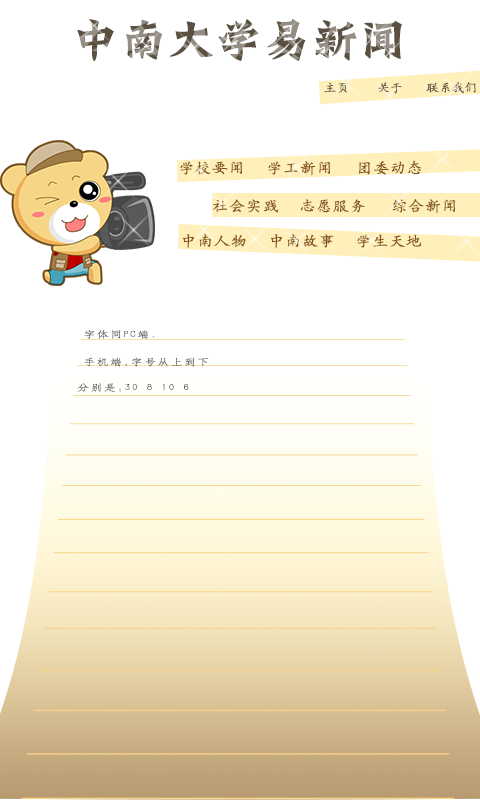
<style>
.page{position:relative;width:480px;height:800px;background:#ffffff}
.page>*{position:absolute;margin:0}
.t1{font:45px "HYh3gj";scale:1.07 1}
.t2{font:12px "HYc1gj";color:#5b5040;scale:1.07 1}
.t3{font:15px "HYc1gj";letter-spacing:0.05em;color:#855615;scale:1.07 1}
.t4{font:9px "HYd1gj";letter-spacing:0.111em;color:#676767;scale:1.33 1}
.t5{font:9px "HYd1gj";letter-spacing:0.111em;color:#595959;scale:1.33 1}
</style>
<div class="page">
<p class="t1" style="left:77px;top:19px;width:325px;height:43px">中南大学易新闻</p>
<p class="t2" style="left:324px;top:82px;width:24px;height:11px">主页</p>
<p class="t2" style="left:378px;top:82px;width:24px;height:12px">关于</p>
<p class="t2" style="left:426px;top:82px;width:50px;height:12px">联系我们</p>
<p class="t3" style="left:180px;top:161px;width:63px;height:14px">学校要闻</p>
<p class="t3" style="left:268px;top:161px;width:63px;height:15px">学工新闻</p>
<p class="t3" style="left:359px;top:160px;width:63px;height:15px">团委动态</p>
<p class="t3" style="left:213px;top:199px;width:66px;height:14px">社会实践</p>
<p class="t3" style="left:301px;top:199px;width:64px;height:14px">志愿服务</p>
<p class="t3" style="left:392px;top:199px;width:64px;height:15px">综合新闻</p>
<p class="t3" style="left:183px;top:234px;width:63px;height:15px">中南人物</p>
<p class="t3" style="left:271px;top:234px;width:63px;height:15px">中南故事</p>
<p class="t3" style="left:357px;top:234px;width:65px;height:14px">学生天地</p>
<p class="t4" style="left:84px;top:329px;width:70px;height:10px">字体同PC端.</p>
<p class="t5" style="left:84px;top:357px;width:125px;height:10px">手机端,字号从上到下</p>
<p class="t5" style="left:77px;top:383px;width:112px;height:9px">分别是:30 8 10 6</p>
</div>
